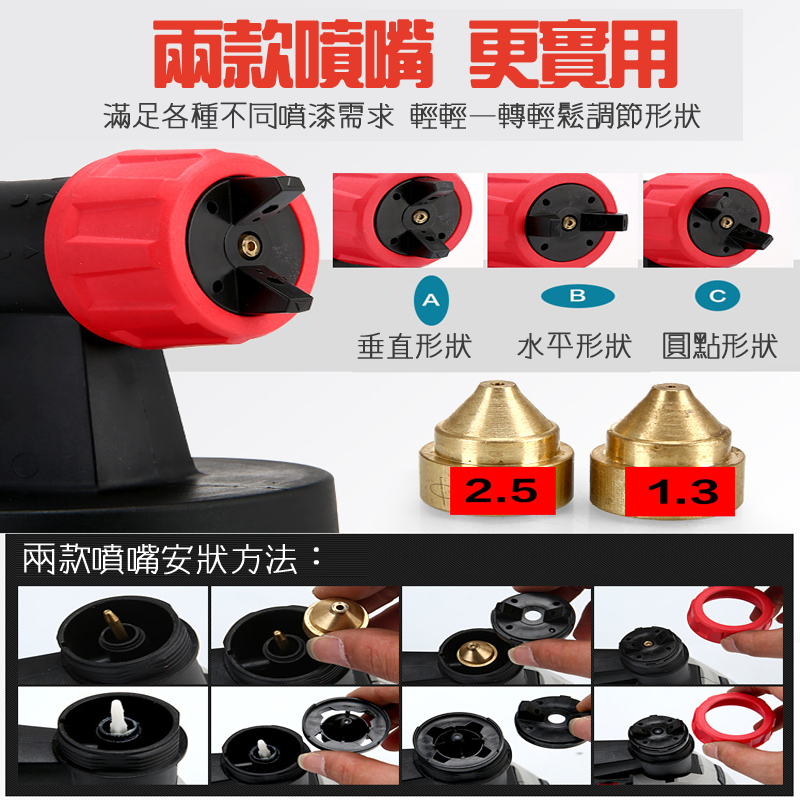
<style>
.page{position:relative;width:800px;height:800px}
.page>*{position:absolute;margin:0}
.t1{font:72px "HanWangZonYi";letter-spacing:-0.05em;color:#e63b2a;font-weight:bold}
.t2{font:30px "winman-tun33014";letter-spacing:-0.05em;color:#3b3b3b;font-weight:bold}
.t3{font:35.4px "winman-tun33014";letter-spacing:-0.05em;color:#ffffff;font-weight:bold}
</style>
<div class="page">
<p class="t1" style="left:153px;top:19px;width:525px;height:69px">兩款噴嘴 更實用</p>
<p class="t2" style="left:103px;top:102px;width:598px;height:27px">滿足各種不同噴漆需求 輕輕一轉輕鬆調節形狀</p>
<p class="t2" style="left:357px;top:332px;width:421px;height:27px">垂直形狀   水平形狀  圓點形狀</p>
<p class="t3" style="left:24px;top:543px;width:295px;height:32px">兩款噴嘴安狀方法：</p>
</div>
